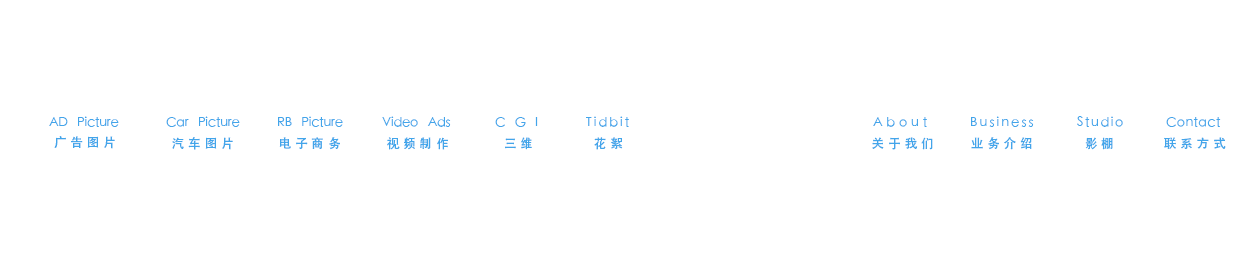
<style>
.page{position:relative;width:1256px;height:265px;background:#ffffff}
.page>*{position:absolute;margin:0}
.t1{font:12.5px "STHeitiSC-Light";color:#42a5ea}
.t2{font:12.5px "STHeitiSC-Light";letter-spacing:0.18em;color:#42a5ea}
.t3{font:12.5px "STHeitiSC-Light";letter-spacing:0.32em;color:#42a5ea}
.t4{font:12.5px "STHeitiSC-Light";letter-spacing:0.14em;color:#42a5ea}
.t5{font:12.5px "STHeitiSC-Light";letter-spacing:0.04em;color:#42a5ea}
.t6{font:12.5px "AdobeHeitiStd-Regular";letter-spacing:0.32em;color:#42a5ea}
</style>
<div class="page">
<p class="t1" style="left:49px;top:116px;width:70px;height:11px">AD   Picture</p>
<p class="t1" style="left:166px;top:116px;width:74px;height:11px">Car   Picture</p>
<p class="t1" style="left:278px;top:116px;width:65px;height:11px">RB   Picture</p>
<p class="t1" style="left:382px;top:116px;width:69px;height:11px">Video   Ads</p>
<p class="t1" style="left:495px;top:117px;width:43px;height:10px">C   G   I</p>
<p class="t2" style="left:586px;top:116px;width:43px;height:11px">Tidbit</p>
<p class="t3" style="left:873px;top:117px;width:54px;height:10px">About</p>
<p class="t2" style="left:971px;top:116px;width:63px;height:11px">Business</p>
<p class="t4" style="left:1077px;top:116px;width:46px;height:11px">Studio</p>
<p class="t5" style="left:1166px;top:117px;width:55px;height:10px">Contact</p>
<p class="t6" style="left:54px;top:136px;width:61px;height:13px">广告图片</p>
<p class="t6" style="left:172px;top:137px;width:61px;height:13px">汽车图片</p>
<p class="t6" style="left:279px;top:137px;width:61px;height:13px">电子商务</p>
<p class="t6" style="left:387px;top:137px;width:61px;height:13px">视频制作</p>
<p class="t6" style="left:505px;top:137px;width:27px;height:13px">三维</p>
<p class="t6" style="left:594px;top:137px;width:29px;height:13px">花絮</p>
<p class="t6" style="left:872px;top:137px;width:61px;height:13px">关于我们</p>
<p class="t6" style="left:971px;top:137px;width:61px;height:13px">业务介绍</p>
<p class="t6" style="left:1085px;top:137px;width:28px;height:13px">影棚</p>
<p class="t6" style="left:1164px;top:137px;width:62px;height:12px">联系方式</p>
</div>
